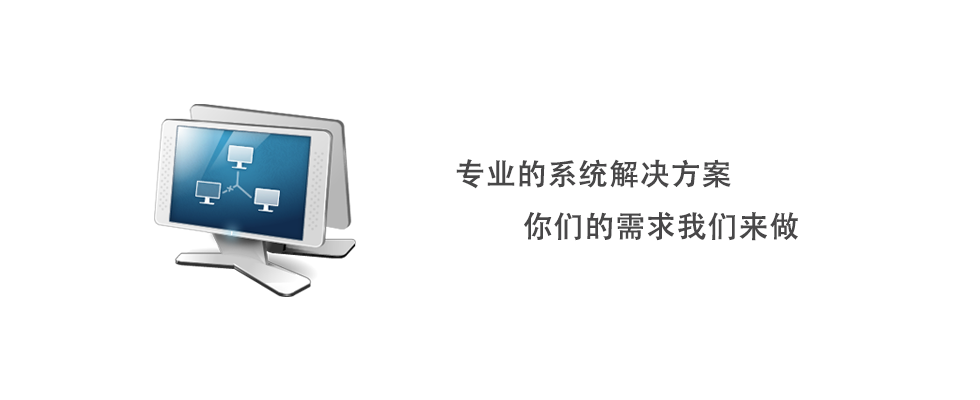
<style>
.page{position:relative;width:980px;height:400px;background:#ffffff}
.page>*{position:absolute;margin:0}
.t1{font:30px "AdobeHeitiStd-Regular";color:#484748;font-weight:bold}
</style>
<div class="page">
<p class="t1" style="left:456px;top:159px;width:342px;height:82px">专业的系统解决方案<br>         你们的需求我们来做</p>
</div>
